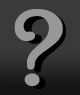
<style>
.page{position:relative;width:80px;height:95px}
.page>*{position:absolute;margin:0}
.t1{font:104.6px "PoorRichard-Regular";color:#9a9797;font-weight:bold;scale:1.14 1}
</style>
<div class="page">
<p class="t1" style="left:14px;top:9px;width:49px;height:77px">?</p>
</div>
